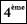
<style>
.page{position:relative;width:27px;height:24px;background:#ffffff}
.page>*{position:absolute;margin:0}
.t1{font:8px "ACaslonPro-Bold";color:#000000}
.t2{font:14px "ACaslonPro-Bold";color:#000000}
</style>
<div class="page">
<p class="t1" style="left:11px;top:4px;width:14px;height:6px">ème</p>
<p class="t2" style="left:3px;top:7px;width:8px;height:10px">4</p>
</div>
